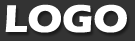
<style>
.page{position:relative;width:135px;height:41px;background:#333333}
.page>*{position:absolute;margin:0}
.t1{font:40px "ErasITC-Bold";color:#ffffff}
</style>
<div class="page">
<p class="t1" style="left:5px;top:4px;width:122px;height:29px">LOGO</p>
</div>
